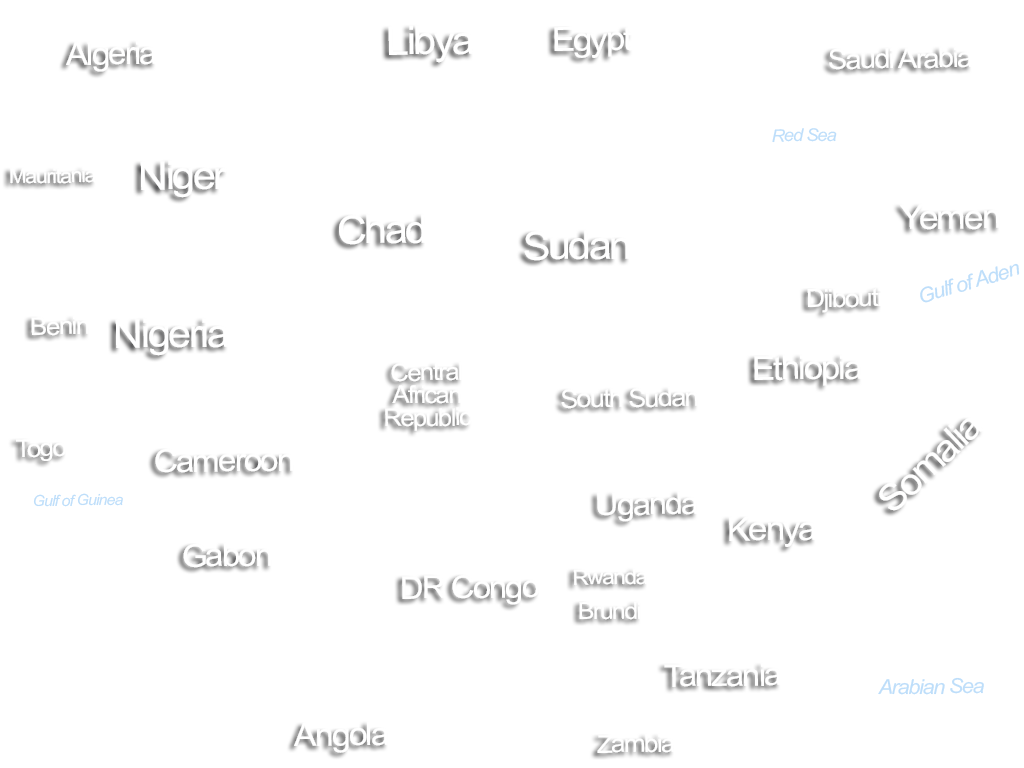
<style>
.page{position:relative;width:1024px;height:768px;background:#ffffff}
.page>*{position:absolute;margin:0}
.t1{font:39.3px "ArialMT";letter-spacing:-0.06em;color:#ffffff;scale:1.05 1}
.t2{font:33.3px "ArialMT";letter-spacing:-0.06em;color:#ffffff;scale:1.05 1}
.t3{font:31.7px "ArialMT";letter-spacing:-0.06em;color:#ffffff;scale:1.05 1}
.t4{font:27.6px "ArialMT";letter-spacing:-0.06em;color:#ffffff;scale:1.05 1}
.t5{font:17.6px "Arial-ItalicMT";letter-spacing:-0.06em;color:#bedefa;scale:1.05 1}
.t6{font:20.2px "ArialMT";letter-spacing:-0.06em;color:#ffffff;scale:1.05 1}
.t7{font:33.8px "ArialMT";letter-spacing:-0.06em;color:#ffffff;scale:1.05 1}
.t8{font:20.6px "Arial-ItalicMT";letter-spacing:-0.06em;color:#bedefa;scale:1.05 1}
.t9{font:25.1px "ArialMT";letter-spacing:-0.06em;color:#ffffff;scale:1.05 1}
.t10{font:24.6px "ArialMT";letter-spacing:-0.06em;color:#ffffff;scale:1.05 1}
.t11{font:24.2px/22.7px "ArialMT";letter-spacing:-0.06em;color:#ffffff;scale:1.05 1}
.t12{font:33.1px "ArialMT";letter-spacing:-0.06em;color:#ffffff;scale:1.05 1}
.t13{font:25.5px "ArialMT";letter-spacing:-0.06em;color:#ffffff;scale:1.05 1}
.t14{font:31.6px "ArialMT";letter-spacing:-0.06em;color:#ffffff;scale:1.05 1}
.t15{font:15.3px "Arial-ItalicMT";letter-spacing:-0.06em;color:#bedefa;scale:1.05 1}
.t16{font:30.9px "ArialMT";letter-spacing:-0.06em;color:#ffffff;scale:1.05 1}
.t17{font:21.4px "ArialMT";letter-spacing:-0.06em;color:#ffffff;scale:1.05 1}
.t18{font:31.2px "ArialMT";letter-spacing:-0.06em;color:#ffffff;scale:1.05 1}
.t19{font:23.5px "ArialMT";letter-spacing:-0.06em;color:#ffffff;scale:1.05 1}
.t20{font:32.1px "ArialMT";letter-spacing:-0.06em;color:#ffffff;scale:1.05 1}
</style>
<div class="page">
<p class="t1" style="left:388px;top:25px;width:86px;height:38px;rotate:-1deg">Libya</p>
<p class="t2" style="left:554px;top:26px;width:79px;height:32px;rotate:-1deg">Egypt</p>
<p class="t3" style="left:66px;top:41px;width:90px;height:31px;rotate:-1deg">Algeria</p>
<p class="t4" style="left:829px;top:47px;width:143px;height:23px;rotate:-1deg">Saudi Arabia</p>
<p class="t5" style="left:772px;top:128px;width:65px;height:15px;rotate:-1deg">Red Sea</p>
<p class="t1" style="left:140px;top:160px;width:88px;height:38px;rotate:-1deg">Niger</p>
<p class="t6" style="left:10px;top:167px;width:86px;height:17px;rotate:-1deg">Mauritania</p>
<p class="t7" style="left:899px;top:204px;width:101px;height:26px;rotate:-1deg">Yemen</p>
<p class="t1" style="left:339px;top:214px;width:86px;height:31px;rotate:-1deg">Chad</p>
<p class="t1" style="left:524px;top:230px;width:106px;height:31px;rotate:-1deg">Sudan</p>
<p class="t8" style="left:920px;top:263px;width:100px;height:40px;rotate:-16deg">Gulf of Aden</p>
<p class="t9" style="left:807px;top:288px;width:74px;height:25px;rotate:-1deg">Djibouti</p>
<p class="t10" style="left:31px;top:316px;width:58px;height:20px;rotate:-1deg">Benin</p>
<p class="t1" style="left:115px;top:318px;width:114px;height:38px;rotate:-1deg">Nigeria</p>
<p class="t11" style="left:385px;top:362px;width:87px;height:69px;text-align:center;rotate:-1deg">Central<br>African<br>Republic</p>
<p class="t12" style="left:754px;top:355px;width:108px;height:31px;rotate:-1deg">Ethiopia</p>
<p class="t13" style="left:561px;top:387px;width:137px;height:22px;rotate:-1deg">South Sudan</p>
<p class="t10" style="left:16px;top:439px;width:50px;height:22px;rotate:-1deg">Togo</p>
<p class="t14" style="left:155px;top:449px;width:139px;height:24px;rotate:-1deg">Cameroon</p>
<p class="t15" style="left:33px;top:493px;width:90px;height:14px;rotate:-1deg">Gulf of Guinea</p>
<p class="t16" style="left:597px;top:491px;width:101px;height:31px;rotate:-1deg">Uganda</p>
<p class="t2" style="left:729px;top:517px;width:87px;height:30px;rotate:-1deg">Kenya</p>
<p class="t14" style="left:183px;top:543px;width:89px;height:25px;rotate:-1deg">Gabon</p>
<p class="t17" style="left:573px;top:568px;width:75px;height:18px;rotate:-1deg">Rwanda</p>
<p class="t18" style="left:402px;top:575px;width:137px;height:30px;rotate:-1deg">DR Congo</p>
<p class="t19" style="left:579px;top:602px;width:62px;height:18px;rotate:-1deg">Brundi</p>
<p class="t18" style="left:664px;top:663px;width:117px;height:24px;rotate:-1deg">Tanzania</p>
<p class="t8" style="left:878px;top:677px;width:106px;height:18px;rotate:-1deg">Arabian Sea</p>
<p class="t20" style="left:294px;top:722px;width:95px;height:31px;rotate:-1deg">Angola</p>
<p class="t10" style="left:597px;top:734px;width:78px;height:19px;rotate:-1deg">Zambia</p>
</div>
